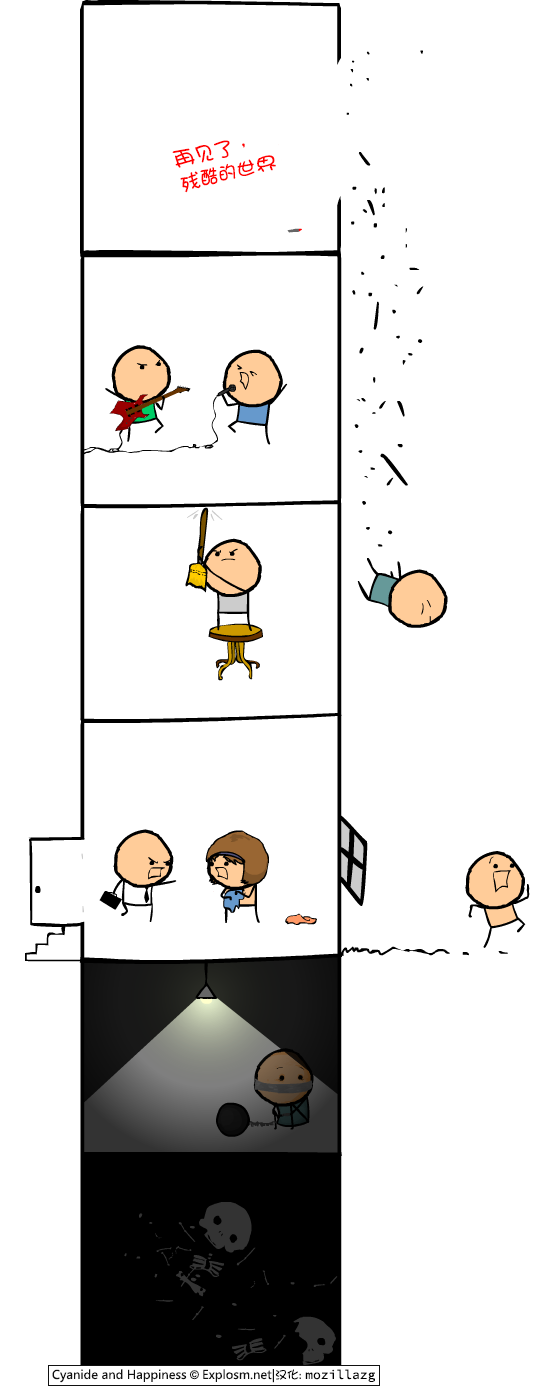
<style>
.page{position:relative;width:550px;height:1400px;background:#ffffff}
.page>*{position:absolute;margin:0}
.t1{font:20px/24px "DFGirl";color:#ff0000}
</style>
<div class="page">
<p class="t1" style="left:172px;top:140px;width:104px;height:53px;rotate:-14deg">再见了，<br>残酷的世界</p>
</div>
